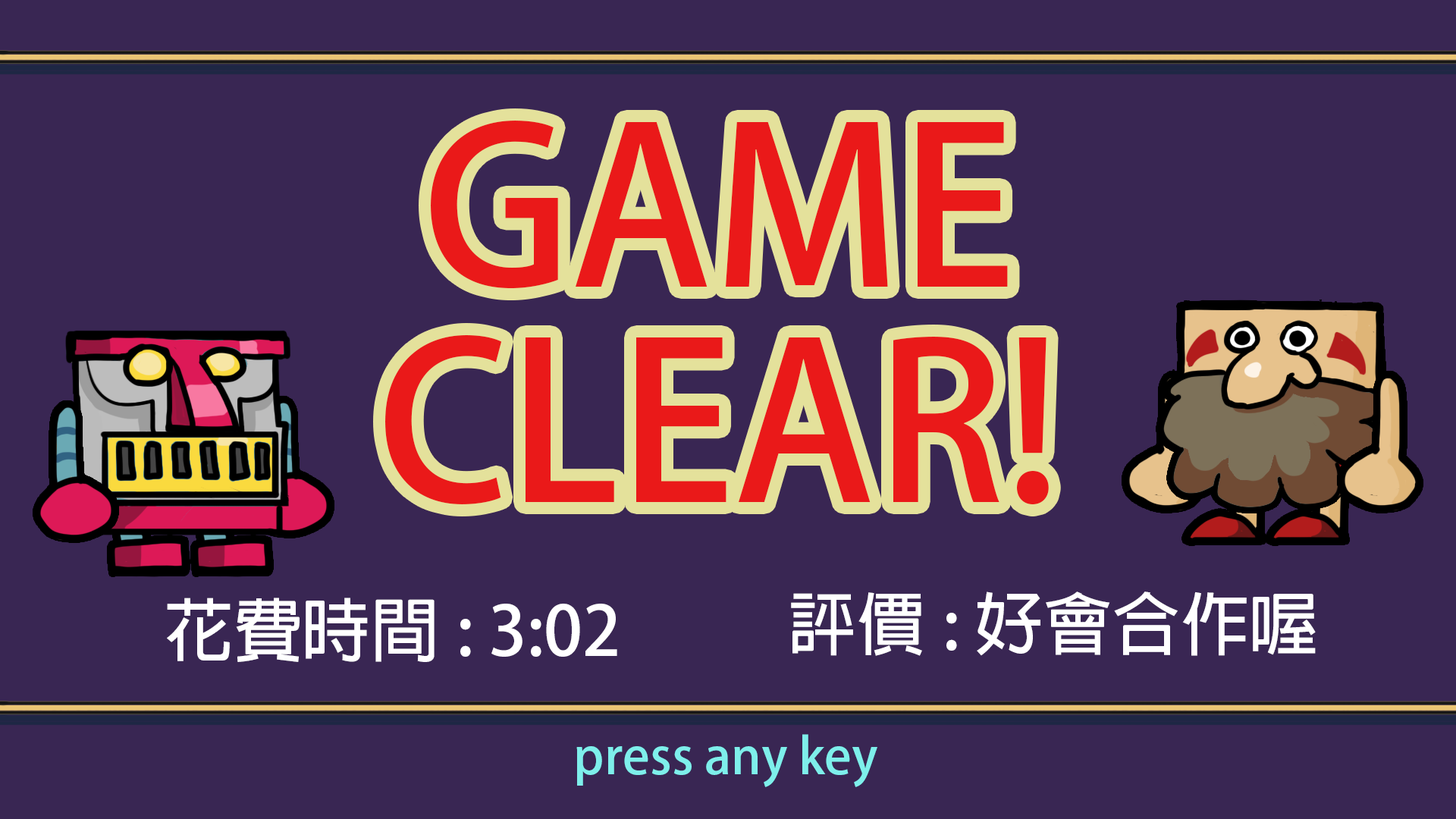
<style>
.page{position:relative;width:1456px;height:819px;background:#392653}
.page>*{position:absolute;margin:0}
.t1{font:51.7px/215.6px "AdobeFanHeitiStd-Bold";color:#ea1919}
.t2{font:16.5px "AdobeFanHeitiStd-Bold";color:#ffffff}
.t3{font:12px "AdobeFanHeitiStd-Bold";color:#7eefeb}
</style>
<div class="page">
<p class="t1" style="left:385px;top:121px;width:664px;height:383px;text-align:center">GAME<br>CLEAR!</p>
<p class="t2" style="left:791px;top:591px;width:525px;height:65px">評價: 好會合作喔</p>
<p class="t2" style="left:167px;top:598px;width:450px;height:64px">花費時間: 3:02</p>
<p class="t3" style="left:576px;top:734px;width:301px;height:53px">press any key</p>
</div>
